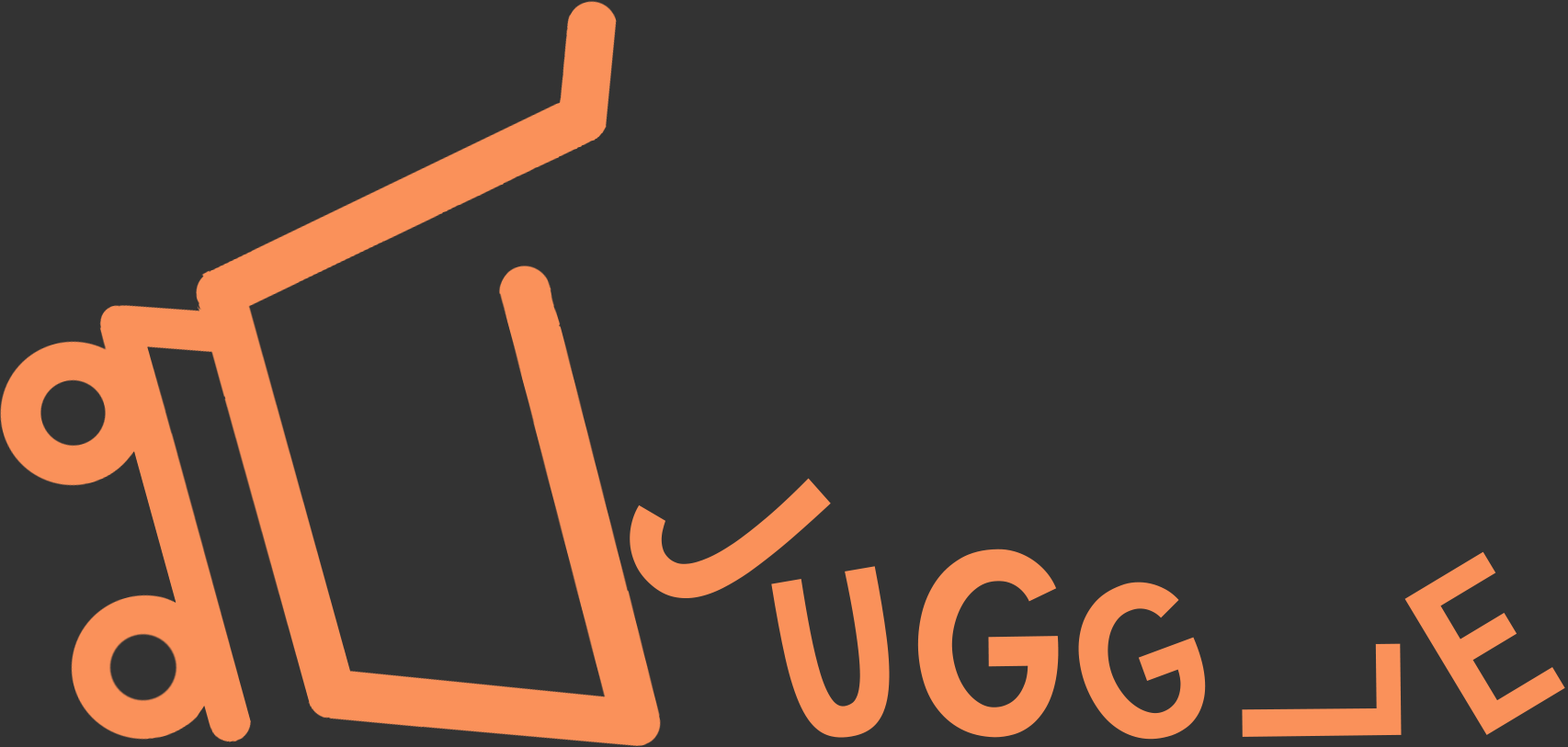
<style>
.page{position:relative;width:1568px;height:747px;background:#333333}
.page>*{position:absolute;margin:0}
.t1{font:275.7px "KGWhattheTeacherWants";color:#fa915a}
.t2{font:232.1px "KGWhattheTeacherWants";color:#fa915a}
.t3{font:242.8px "KGWhattheTeacherWants";color:#fa915a}
</style>
<div class="page">
<p class="t1" style="left:630px;top:478px;width:201px;height:120px;rotate:48deg">J</p>
<p class="t1" style="left:917px;top:549px;width:142px;height:189px">G</p>
<p class="t2" style="left:1404px;top:551px;width:161px;height:184px;rotate:-31deg">E</p>
<p class="t3" style="left:771px;top:566px;width:119px;height:172px;rotate:-10deg">U</p>
<p class="t2" style="left:1078px;top:582px;width:128px;height:158px;rotate:-19deg">G</p>
<p class="t2" style="left:1242px;top:643px;width:160px;height:94px;rotate:-91deg">L</p>
</div>
